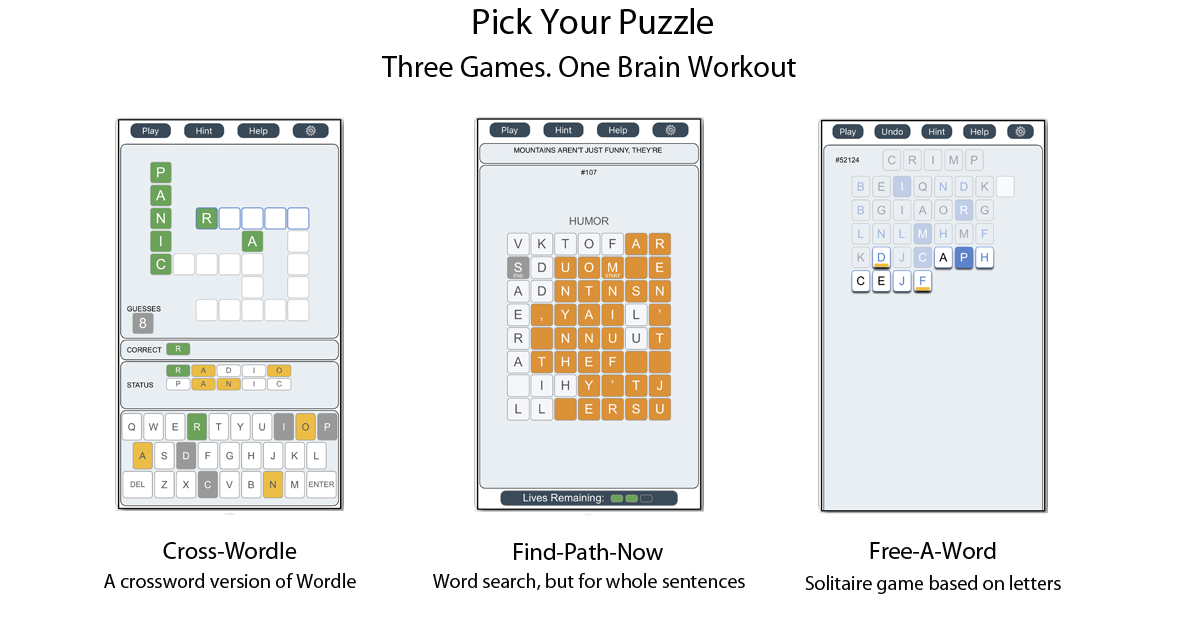
<style>
.page{position:relative;width:1200px;height:630px;background:#ffffff}
.page>*{position:absolute;margin:0}
.t1{font:30px "MyriadPro-Regular";color:#030303}
.t2{font:36px "MyriadPro-Regular";color:#030303}
.t3{font:24px "MyriadPro-Regular";color:#030303}
.t4{font:20px "MyriadPro-Regular";color:#030303}
.t5{font:20px "MyriadPro-Regular";color:#040404}
</style>
<div class="page">
<p class="t1" style="left:382px;top:8px;width:414px;height:69px;text-align:center"><span class="t2">Pick Your Puzzle<br></span>Three Games. One Brain Workout</p>
<p class="t3" style="left:163px;top:542px;width:134px;height:17px">Cross-Wordle</p>
<p class="t3" style="left:514px;top:543px;width:149px;height:17px">Find-Path-Now</p>
<p class="t3" style="left:870px;top:542px;width:126px;height:17px">Free-A-Word</p>
<p class="t4" style="left:104px;top:573px;width:252px;height:15px">A crossword version of Wordle</p>
<p class="t5" style="left:433px;top:573px;width:312px;height:17px">Word search, but for whole sentences</p>
<p class="t5" style="left:805px;top:575px;width:256px;height:19px">Solitaire game based on letters</p>
</div>
